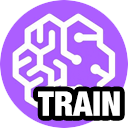
<style>
.page{position:relative;width:128px;height:128px;background:#ffffff}
.page>*{position:absolute;margin:0}
.t1{font:34px "HelveticaNeue-CondensedBlack";color:#ffffff}
</style>
<div class="page">
<p class="t1" style="left:38px;top:91px;width:82px;height:25px">TRAIN</p>
</div>
